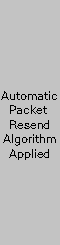
<style>
.page{position:relative;width:60px;height:245px;background:#c3c3c3}
.page>*{position:absolute;margin:0}
.t1{font:12px "PingFangTC-Regular";color:#000000}
</style>
<div class="page">
<p class="t1" style="left:1px;top:91px;width:56px;height:69px;text-align:center">Automatic<br>Packet <br>Resend<br>Algorithm<br>Applied</p>
</div>
